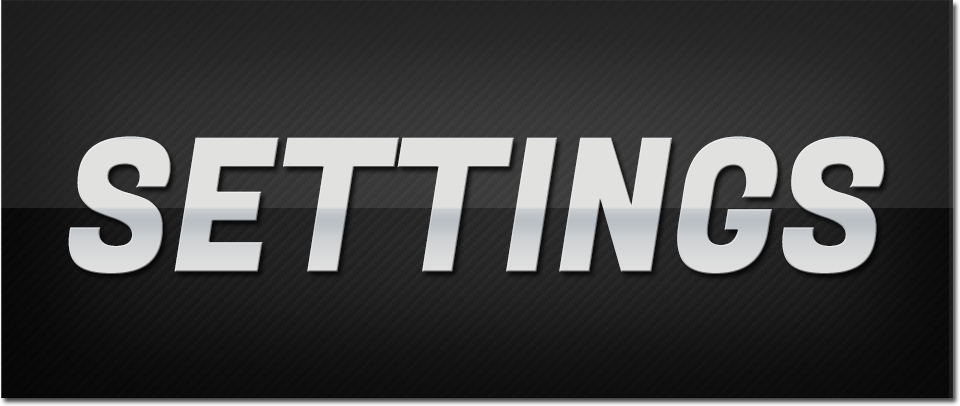
<style>
.page{position:relative;width:960px;height:406px}
.page>*{position:absolute;margin:0}
.t1{font:185.2px "FugazOne-Regular";color:#dfdfdf;scale:0.89 1}
</style>
<div class="page">
<p class="t1" style="left:68px;top:136px;width:817px;height:138px">SETTINGS</p>
</div>
